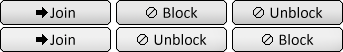
<style>
.page{position:relative;width:343px;height:52px}
.page>*{position:absolute;margin:0}
.t1{font:16px "Calibri";color:#000000}
</style>
<div class="page">
<p class="t1" style="left:50px;top:7px;width:25px;height:11px">Join</p>
<p class="t1" style="left:163px;top:7px;width:35px;height:11px">Block</p>
<p class="t1" style="left:270px;top:7px;width:53px;height:11px">Unblock</p>
<p class="t1" style="left:50px;top:34px;width:25px;height:11px">Join</p>
<p class="t1" style="left:154px;top:34px;width:53px;height:11px">Unblock</p>
<p class="t1" style="left:279px;top:34px;width:35px;height:11px">Block</p>
</div>
